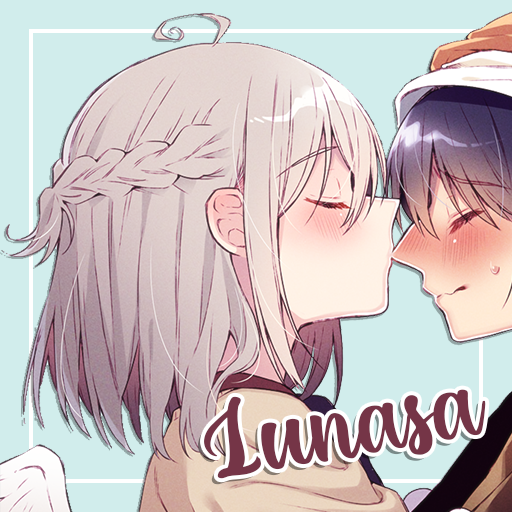
<style>
.page{position:relative;width:512px;height:512px;background:#d1edec}
.page>*{position:absolute;margin:0}
.t1{font:120px "HelloValentica-Regular";color:#753547}
</style>
<div class="page">
<p class="t1" style="left:204px;top:389px;width:282px;height:90px;rotate:-10deg">Lunasa</p>
</div>
